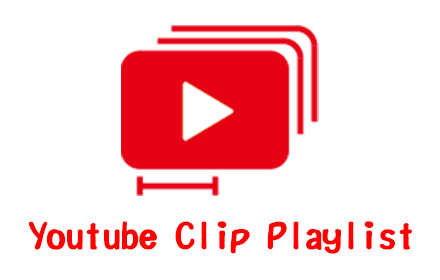
<style>
.page{position:relative;width:440px;height:280px;background:#ffffff}
.page>*{position:absolute;margin:0}
.t1{font:40px "GansinkaishoEG-Heavy-SJIS";letter-spacing:-0.04em;color:#ff0000}
</style>
<div class="page">
<p class="t1" style="left:28px;top:221px;width:384px;height:33px">Youtube Clip Playlist</p>
</div>
